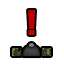
<style>
.page{position:relative;width:64px;height:64px;background:#ffffff}
.page>*{position:absolute;margin:0}
.t1{font:32px "Impact";color:#c20000}
</style>
<div class="page">
<p class="t1" style="left:28px;top:10px;width:7px;height:25px">!</p>
</div>
